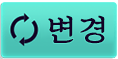
<style>
.page{position:relative;width:118px;height:59px}
.page>*{position:absolute;margin:0}
.t1{font:31px "SDKukdetopokki-aLt";letter-spacing:0.12em;color:#120126}
</style>
<div class="page">
<p class="t1" style="left:48px;top:15px;width:57px;height:29px">변경</p>
</div>
